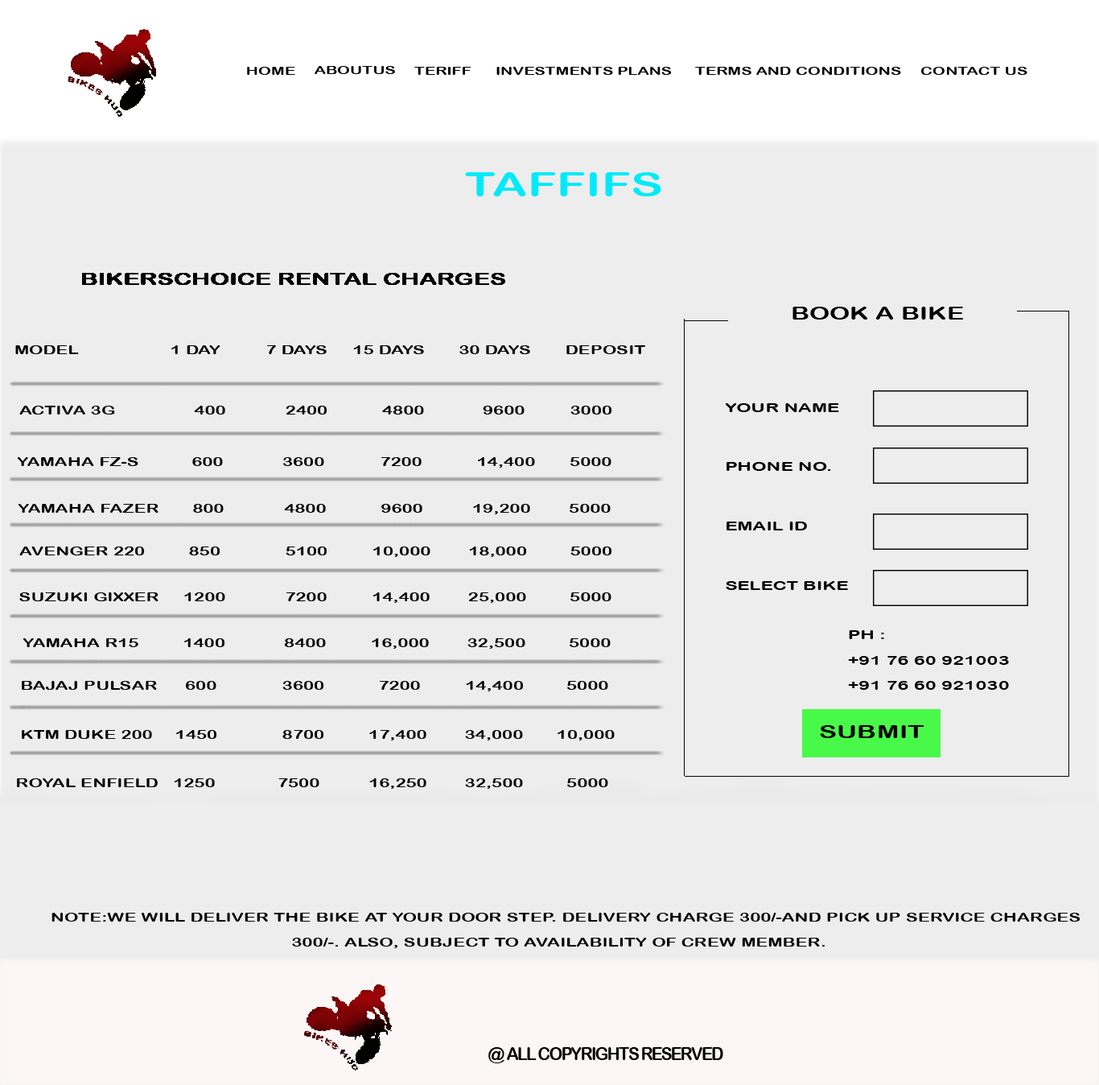
<style>
.page{position:relative;width:1099px;height:1085px;background:#ededed}
.page>*{position:absolute;margin:0}
.t1{font:11.2px "ArialRoundedMTBold";letter-spacing:0.005em;color:#040000;text-transform:uppercase;scale:1.44 1}
.t2{font:33.6px "ArialRoundedMTBold";letter-spacing:0.005em;color:#02eafa;text-transform:uppercase;scale:1.44 1}
.t3{font:17.9px "ArialRoundedMTBold";letter-spacing:0.005em;color:#030303;text-transform:uppercase;scale:1.44 1}
.t4{font:12.3px "ArialRoundedMTBold";letter-spacing:0.005em;color:#030303;text-transform:uppercase;scale:1.44 1}
.t5{font:12.8px/59.2px "ArialRoundedMTBold";letter-spacing:0.005em;color:#030303;text-transform:uppercase;scale:1.45 1}
.t6{font:12.8px/25.4px "ArialRoundedMTBold";letter-spacing:0.005em;color:#030303;text-transform:uppercase;scale:1.45 1}
.t7{font:18.4px "ArialRoundedMTBold";letter-spacing:0.005em;color:#030303;text-transform:uppercase;scale:1.45 1}
.t8{font:12.2px/25.4px "ArialRoundedMTBold";letter-spacing:0.005em;color:#030303;text-transform:uppercase;scale:1.45 1}
.t9{font:17.4px "ArialRoundedMTBold";letter-spacing:-0.075em;color:#030000;text-transform:uppercase}
</style>
<div class="page">
<p class="t1" style="left:315px;top:66px;width:80px;height:8px">aboutus</p>
<p class="t1" style="left:247px;top:67px;width:48px;height:8px">home</p>
<p class="t1" style="left:414px;top:67px;width:58px;height:8px">teriff</p>
<p class="t1" style="left:497px;top:67px;width:175px;height:8px">investments plans</p>
<p class="t1" style="left:695px;top:67px;width:206px;height:8px">terms and conditions</p>
<p class="t1" style="left:921px;top:67px;width:107px;height:8px">contact us</p>
<p class="t2" style="left:465px;top:172px;width:196px;height:24px">TAFFIFS</p>
<p class="t3" style="left:793px;top:307px;width:171px;height:12px">Book a Bike</p>
<p class="t4" style="left:15px;top:345px;width:630px;height:9px">Model               1 Day     7 Days     15 Days     30 Days       Deposit</p>
<p class="t4" style="left:19px;top:406px;width:593px;height:8px">Activa 3G             400        2400          4800        9600       3000</p>
<p class="t5" style="left:725px;top:403px;width:123px;height:187px">Your Name<br>Phone no.<br>Email Id<br>Select Bike</p>
<p class="t4" style="left:17px;top:457px;width:595px;height:11px">Yamaha FZ-S       600            3600          7200            14,400       5000</p>
<p class="t4" style="left:18px;top:504px;width:593px;height:10px">Yamaha Fazer       800        4800          9600          19,200       5000</p>
<p class="t4" style="left:19px;top:546px;width:593px;height:11px">Avenger 220      850           5100        10,000    18,000       5000</p>
<p class="t4" style="left:19px;top:592px;width:593px;height:11px">Suzuki Gixxer     1200        7200        14,400    25,000       5000</p>
<p class="t4" style="left:23px;top:638px;width:588px;height:11px">Yamaha R15          1400          8400       16,000   32,500      5000</p>
<p class="t6" style="left:848px;top:630px;width:161px;height:60px">Ph : <br>+91 76 60 921003 <br>+91 76 60 921030</p>
<p class="t4" style="left:22px;top:681px;width:586px;height:10px">Bajaj Pulsar     600             3600         7200         14,400      5000</p>
<p class="t7" style="left:820px;top:725px;width:105px;height:13px">submit</p>
<p class="t4" style="left:22px;top:730px;width:593px;height:10px">KTM Duke 200   1450             8700       17,400   34,000    10,000</p>
<p class="t4" style="left:17px;top:778px;width:591px;height:11px">Royal Enfield   1250             7500        16,250    32,500       5000</p>
<p class="t8" style="left:52px;top:913px;width:1029px;height:35px">Note:We will deliver the bike at your door step. Delivery charge 300/-and pick up service charges <br>                                                 300/-. Also, subject to availability of crew member.</p>
<p class="t9" style="left:488px;top:1047px;width:235px;height:16px">@ all copyrights reserved</p>
</div>
